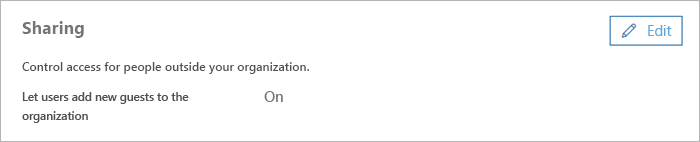
<style>
.page{position:relative;width:700px;height:142px;background:#ffffff}
.page>*{position:absolute;margin:0}
.t1{font:17.5px "SegoeUI-Bold";color:#757575}
.t2{font:14.7px "SegoeUI";color:#5ea6d8}
.t3{font:12.1px "SegoeUI-Semibold";color:#505050}
.t4{font:11.6px/18.7px "SegoeUI-Semibold";color:#505050}
.t5{font:14.7px "SegoeUI-Semibold";color:#757575}
</style>
<div class="page">
<p class="t1" style="left:22px;top:21px;width:62px;height:17px">Sharing</p>
<p class="t2" style="left:648px;top:25px;width:24px;height:11px">Edit</p>
<p class="t3" style="left:22px;top:62px;width:287px;height:12px">Control access for people outside your organization.</p>
<p class="t4" style="left:22px;top:92px;width:167px;height:31px">Let users add new guests to the<br>organization</p>
<p class="t5" style="left:264px;top:91px;width:19px;height:11px">On</p>
</div>
